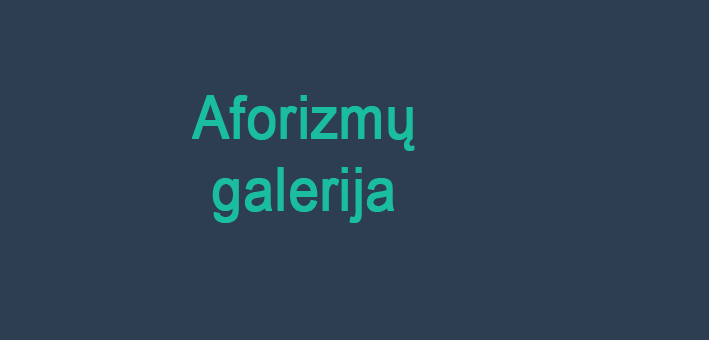
<style>
.page{position:relative;width:709px;height:340px;background:#2c3e50}
.page>*{position:absolute;margin:0}
.t1{font:60px "ArialMT";color:#1abd9d;font-weight:bold;scale:0.9 1}
</style>
<div class="page">
<p class="t1" style="left:191px;top:95px;width:224px;height:128px;text-align:center">Aforizmų<br>galerija</p>
</div>
